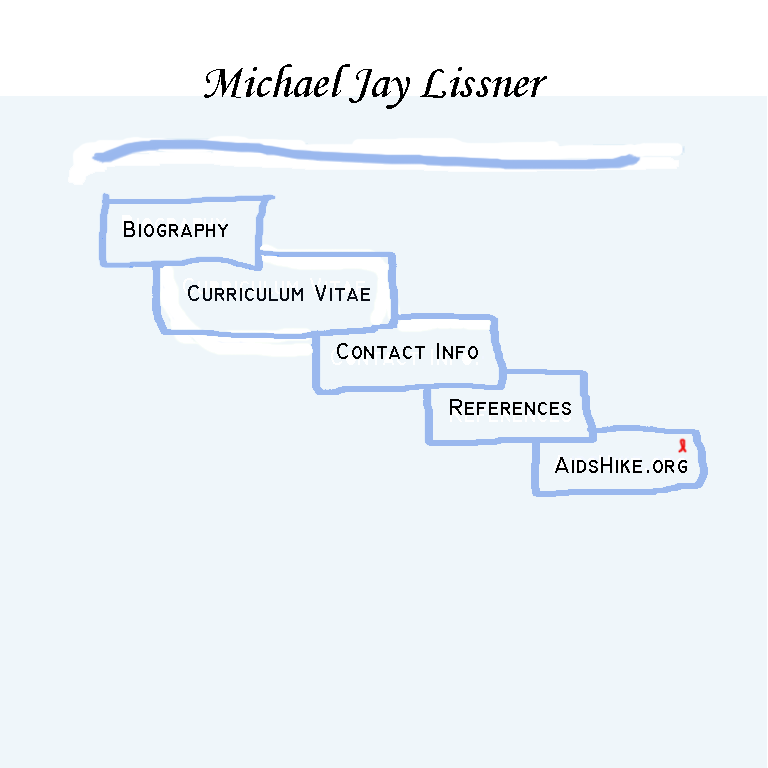
<style>
.page{position:relative;width:768px;height:768px;background:#eff6fa}
.page>*{position:absolute;margin:0}
.t1{font:48px "MonotypeCorsiva";color:#000000}
.t2{font:24px "TechnicBold";color:#000000}
</style>
<div class="page">
<p class="t1" style="left:204px;top:64px;width:343px;height:45px">Michael Jay Lissner</p>
<p class="t2" style="left:124px;top:221px;width:104px;height:16px">Biography</p>
<p class="t2" style="left:188px;top:285px;width:182px;height:16px">Curriculum Vitae</p>
<p class="t2" style="left:337px;top:343px;width:141px;height:16px">Contact Info</p>
<p class="t2" style="left:450px;top:399px;width:121px;height:16px">References</p>
</div>
